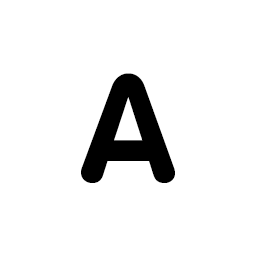
<style>
.page{position:relative;width:256px;height:256px;background:#ffffff}
.page>*{position:absolute;margin:0}
.t1{font:150px "RotondaC-Bold";color:#000000}
</style>
<div class="page">
<p class="t1" style="left:81px;top:73px;width:94px;height:110px">A</p>
</div>
